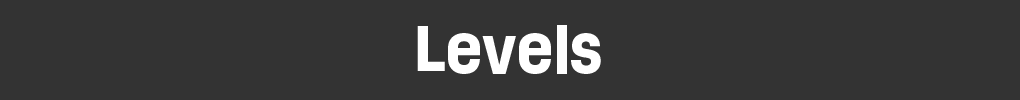
<style>
.page{position:relative;width:1020px;height:100px;background:#333333}
.page>*{position:absolute;margin:0}
.t1{font:60px "Ruddy-Bold";color:#ffffff}
</style>
<div class="page">
<p class="t1" style="left:417px;top:25px;width:184px;height:49px">Levels</p>
</div>
